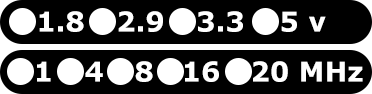
<style>
.page{position:relative;width:372px;height:94px;background:#000000}
.page>*{position:absolute;margin:0}
.t1{font:27px "Verdana-Bold";letter-spacing:0.01em;color:#ffffff}
</style>
<div class="page">
<p class="t1" style="left:39px;top:11px;width:45px;height:21px">1.8</p>
<p class="t1" style="left:118px;top:11px;width:45px;height:21px">2.9</p>
<p class="t1" style="left:198px;top:11px;width:45px;height:21px">3.3</p>
<p class="t1" style="left:281px;top:11px;width:45px;height:21px">5 v</p>
<p class="t1" style="left:37px;top:61px;width:14px;height:21px">1</p>
<p class="t1" style="left:85px;top:61px;width:18px;height:21px">4</p>
<p class="t1" style="left:135px;top:61px;width:18px;height:21px">8</p>
<p class="t1" style="left:185px;top:61px;width:34px;height:21px">16</p>
<p class="t1" style="left:253px;top:61px;width:110px;height:21px">20 MHz</p>
</div>
